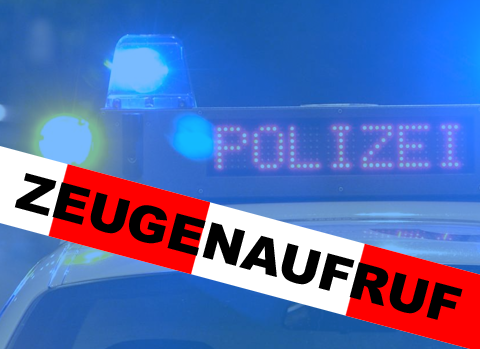
<style>
.page{position:relative;width:480px;height:349px}
.page>*{position:absolute;margin:0}
.t1{font:50.2px "Arial-Black";color:#000000}
</style>
<div class="page">
<p class="t1" style="left:14px;top:173px;width:449px;height:147px;rotate:15deg">ZEUGENAUFRUF</p>
</div>
